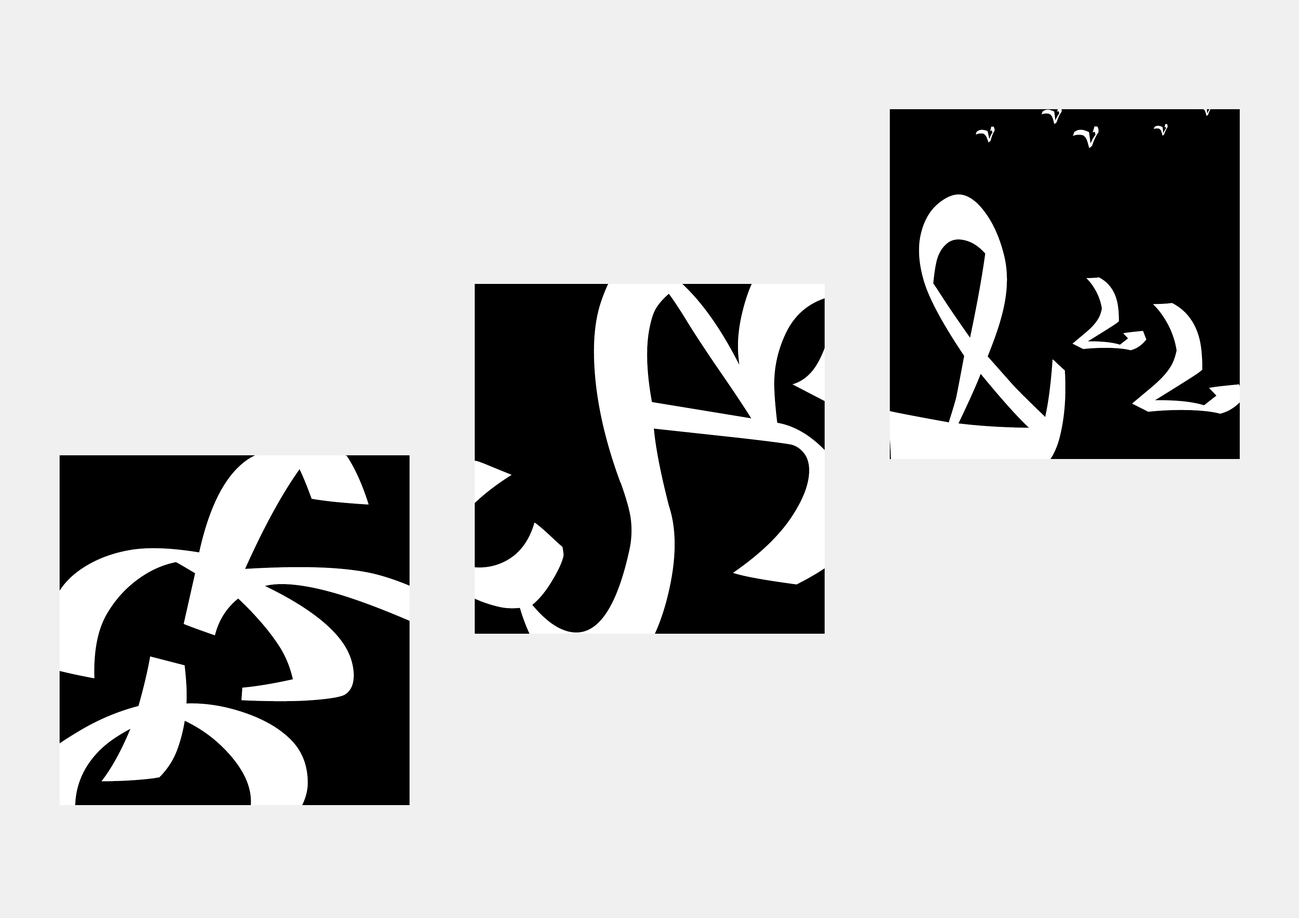
<style>
.page{position:relative;width:1299px;height:918px;background:#f0f0f0}
.page>*{position:absolute;margin:0}
.t1{font:17.5px "MaturaMTScriptCapitals";color:#ffffff}
.t2{font:12.1px "MaturaMTScriptCapitals";color:#ffffff}
.t3{font:16.2px "MaturaMTScriptCapitals";color:#ffffff}
.t4{font:22.3px "MaturaMTScriptCapitals";color:#ffffff}
.t5{font:211.2px "MaturaMTScriptCapitals";color:#ffffff}
.t6{font:305.5px "MaturaMTScriptCapitals";color:#ffffff}
.t7{font:71.3px "MaturaMTScriptCapitals";color:#ffffff}
.t8{font:108.4px "MaturaMTScriptCapitals";color:#ffffff}
.t9{font:277.8px "MaturaMTScriptCapitals";color:#ffffff}
.t10{font:296.6px "MaturaMTScriptCapitals";color:#ffffff}
.t11{font:247.2px "MaturaMTScriptCapitals";color:#ffffff}
</style>
<div class="page">
<p class="t1" style="left:1041px;top:107px;width:20px;height:17px;rotate:-13deg">V</p>
<p class="t2" style="left:1197px;top:104px;width:14px;height:12px;rotate:-13deg">V</p>
<p class="t2" style="left:1153px;top:124px;width:14px;height:12px;rotate:-13deg">V</p>
<p class="t3" style="left:976px;top:127px;width:18px;height:16px;rotate:-17deg">V</p>
<p class="t4" style="left:1073px;top:126px;width:25px;height:22px;rotate:-13deg">V</p>
<p class="t5" style="left:886px;top:194px;width:179px;height:277px;rotate:104deg">A</p>
<p class="t6" style="left:594px;top:258px;width:278px;height:327px;rotate:-91deg">B</p>
<p class="t7" style="left:1072px;top:277px;width:74px;height:74px;rotate:54deg">V</p>
<p class="t8" style="left:1132px;top:303px;width:112px;height:111px;rotate:54deg">V</p>
<p class="t9" style="left:48px;top:449px;width:420px;height:253px;rotate:-33deg">K</p>
<p class="t10" style="left:404px;top:460px;width:271px;height:226px;rotate:-78deg">E</p>
<p class="t11" style="left:20px;top:656px;width:288px;height:247px;rotate:-45deg">Q</p>
</div>
